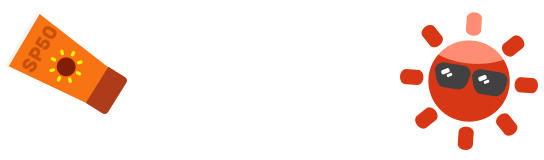
<style>
.page{position:relative;width:544px;height:160px;background:#ffffff}
.page>*{position:absolute;margin:0}
.t1{font:20.6px "Archive";letter-spacing:0.02em;color:#c94e0b}
</style>
<div class="page">
<p class="t1" style="left:22px;top:25px;width:35px;height:48px;rotate:-59deg">sp50</p>
</div>
